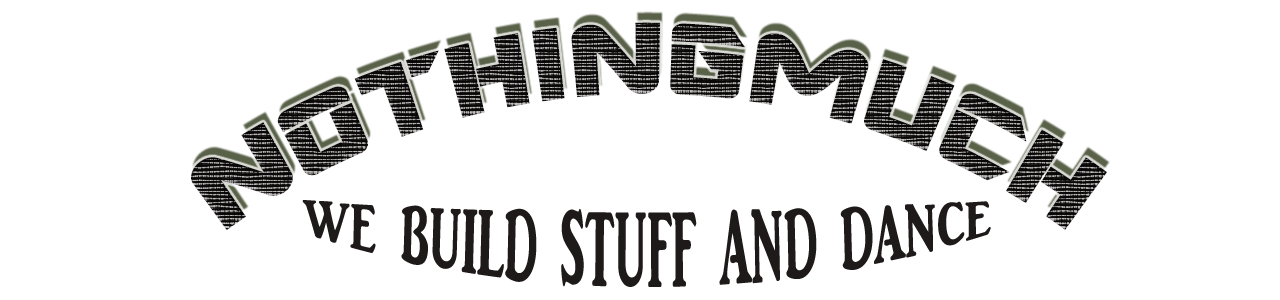
<style>
.page{position:relative;width:1280px;height:300px;background:#ffffff}
.page>*{position:absolute;margin:0}
.t1{font:112px/6px "ARDESTINE";letter-spacing:0.01em;color:#1f1a1a;text-transform:uppercase}
.t2{font:48px/6px "ARJULIAN";letter-spacing:0.01em;color:#1f1a1a;text-transform:uppercase}
</style>
<div class="page">
<p class="t1" style="left:191px;top:22px;width:916px;height:208px;text-align:center">NothingMuch</p>
<p class="t2" style="left:302px;top:200px;width:689px;height:87px;text-align:center">We build stuff and dance</p>
</div>
